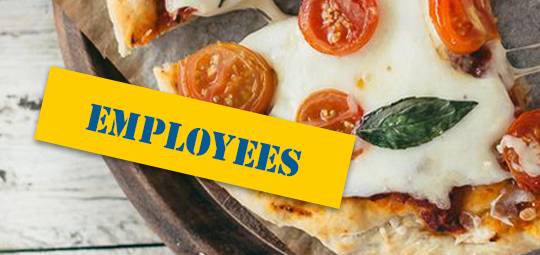
<style>
.page{position:relative;width:540px;height:255px}
.page>*{position:absolute;margin:0}
.t1{font:40px "Stencil";color:#065a8f}
</style>
<div class="page">
<p class="t1" style="left:85px;top:103px;width:217px;height:74px;rotate:13deg">EmPLOYEES</p>
</div>
